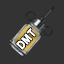
<style>
.page{position:relative;width:64px;height:64px;background:#333333}
.page>*{position:absolute;margin:0}
.t1{font:12.1px "AcuminConcept-Bold";color:#ffffff;scale:0.8 1}
</style>
<div class="page">
<p class="t1" style="left:16px;top:28px;width:20px;height:22px;rotate:-49deg">DMT</p>
</div>
